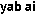
<style>
.page{position:relative;width:36px;height:14px;background:#ffffff}
.page>*{position:absolute;margin:0}
.t1{font:14px "PTSans-Bold";color:#000000}
</style>
<div class="page">
<p class="t1" style="left:0px;top:1px;width:35px;height:13px">yab ai</p>
</div>
